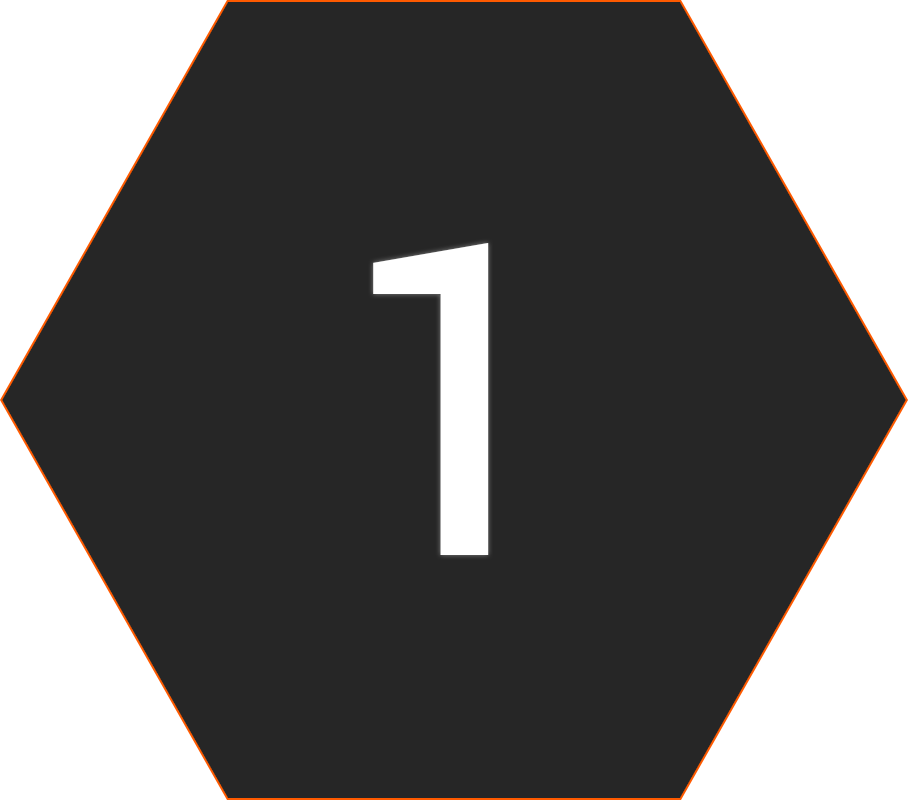
<style>
.page{position:relative;width:908px;height:800px;background:#262626}
.page>*{position:absolute;margin:0}
.t1{font:600px "BankGothicBT-Light";color:#ffffff}
</style>
<div class="page">
<p class="t1" style="left:373px;top:243px;width:116px;height:312px">1</p>
</div>
